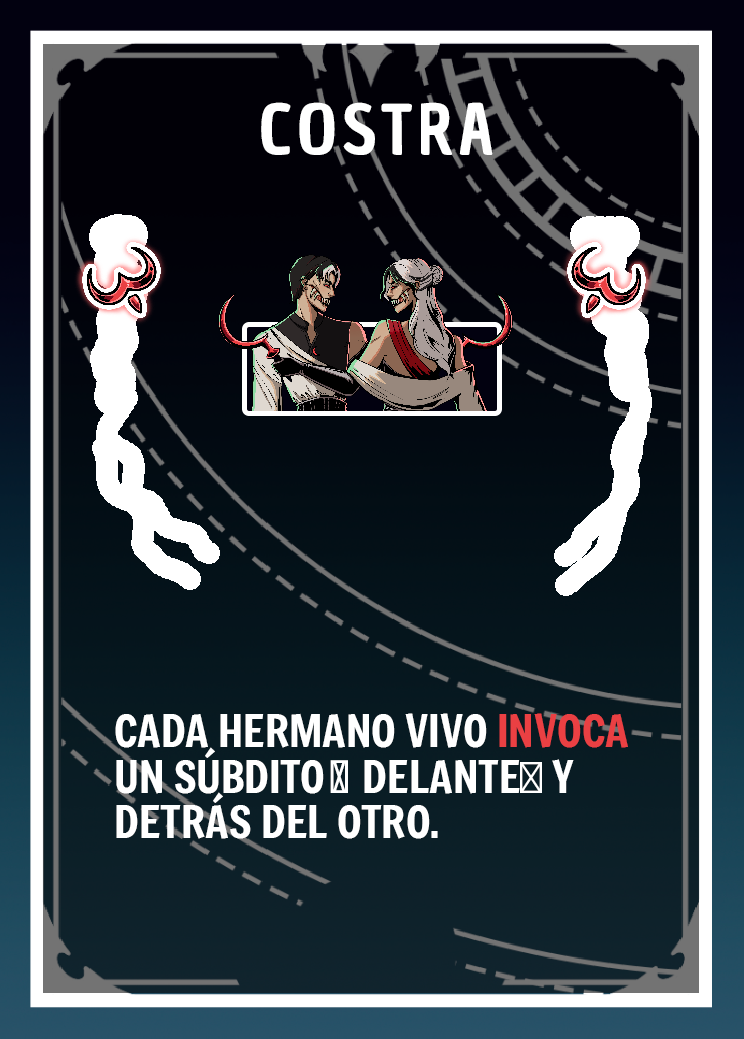
<style>
.page{position:relative;width:744px;height:1039px}
.page>*{position:absolute;margin:0}
.t1{font:66.7px "ChauPhilomeneOne-Regular";letter-spacing:0.075em;color:#ffffff}
.t2{font:43.7px/45.8px "Freeman-Regular";color:#ffffff}
.t3{font:43.7px/45.8px "Freeman-Regular";color:#ea4043}
.t4{font:43.7px/45.8px "MyriadPro-Regular";color:#ffffff}
</style>
<div class="page">
<p class="t1" style="left:261px;top:102px;width:232px;height:53px">COSTRA</p>
<p class="t2" style="left:115px;top:713px;width:513px;height:126px">CADA HERMANO VIVO <span class="t3">INVOCA </span>UN SÚBDITO👾 DELANTE<span class="t4">⬆️</span> Y DETRÁS DEL OTRO.</p>
</div>
